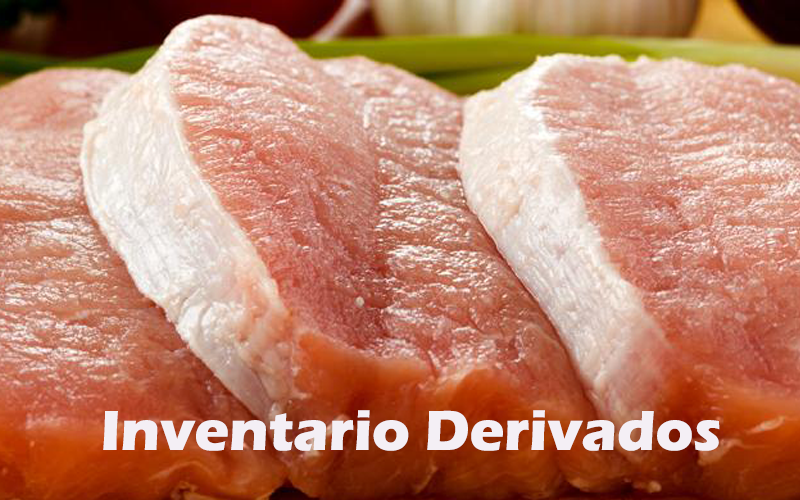
<style>
.page{position:relative;width:800px;height:500px}
.page>*{position:absolute;margin:0}
.t1{font:58.3px "ErasITC-Bold";color:#f4eff5}
</style>
<div class="page">
<p class="t1" style="left:103px;top:410px;width:617px;height:41px">Inventario Derivados</p>
</div>
